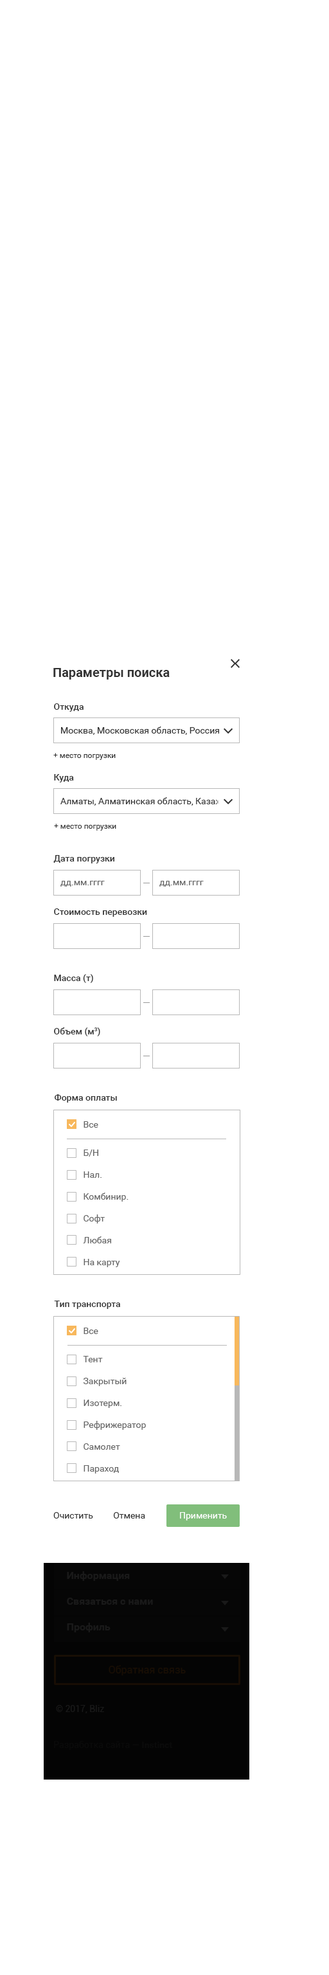
<style>
.page{position:relative;width:329px;height:1975px;background:#ffffff}
.page>*{position:absolute;margin:0}
.t1{font:12.9px "Roboto-Bold";color:#333333}
.t2{font:9px "Roboto-Medium";color:#333333}
.t3{font:9px "Roboto-Regular";color:#333333}
.t4{font:7.7px "Roboto-Regular";color:#333333}
.t5{font:9px "Roboto-Regular";color:#666666}
.t6{font:9px/15.4px "Roboto-Regular";color:#666666}
.t7{font:9px "Roboto-Regular";color:#ffffff}
.t8{font:10.3px "Roboto-Regular";color:#180e04}
.t9{font:9px "Roboto-Regular";color:#191919}
.t10{font:9px "Roboto-Regular";color:#0a0a0a}
.t11{font:9px "Roboto-Bold";color:#0a0a0a}
</style>
<div class="page">
<p class="t1" style="left:53px;top:668px;width:117px;height:12px">Параметры поиска</p>
<p class="t2" style="left:54px;top:703px;width:30px;height:9px">Откуда</p>
<p class="t3" style="left:61px;top:726px;width:158px;height:9px">Москва, Московская область, Россия</p>
<p class="t4" style="left:53px;top:753px;width:63px;height:7px">+ место погрузки</p>
<p class="t2" style="left:54px;top:774px;width:20px;height:8px">Куда</p>
<p class="t3" style="left:60px;top:797px;width:179px;height:9px">Алматы, Алматинская область, Казахстан</p>
<p class="t4" style="left:54px;top:824px;width:62px;height:7px">+ место погрузки</p>
<p class="t2" style="left:53px;top:855px;width:61px;height:8px">Дата погрузки</p>
<p class="t5" style="left:60px;top:881px;width:45px;height:6px">дд.мм.гггг</p>
<p class="t5" style="left:159px;top:881px;width:45px;height:6px">дд.мм.гггг</p>
<p class="t2" style="left:54px;top:908px;width:93px;height:9px">Стоимость перевозки</p>
<p class="t2" style="left:54px;top:974px;width:39px;height:9px">Масса (т)</p>
<p class="t2" style="left:54px;top:1027px;width:46px;height:9px">Объем (м3)</p>
<p class="t2" style="left:55px;top:1094px;width:62px;height:8px">Форма оплаты</p>
<p class="t6" style="left:83px;top:1121px;width:46px;height:146px">Все<br>Б/Н<br>Нал.<br>Комбинир.<br>Софт<br>Любая<br>На карту</p>
<p class="t2" style="left:54px;top:1300px;width:66px;height:9px">Тип транспорта</p>
<p class="t6" style="left:83px;top:1328px;width:63px;height:145px">Все<br>Тент<br>Закрытый<br>Изотерм.<br>Рефрижератор<br>Самолет<br>Параход</p>
<p class="t3" style="left:53px;top:1512px;width:40px;height:6px">Очистить</p>
<p class="t3" style="left:113px;top:1512px;width:32px;height:6px">Отмена</p>
<p class="t7" style="left:180px;top:1512px;width:47px;height:8px">Применить</p>
<p class="t8" style="left:109px;top:1665px;width:77px;height:10px">Обратная связь</p>
<p class="t9" style="left:56px;top:1705px;width:48px;height:8px">© 2017, Bliz</p>
<p class="t10" style="left:54px;top:1741px;width:118px;height:9px">Разработка сайта — <span class="t11">Instinct</span></p>
</div>
